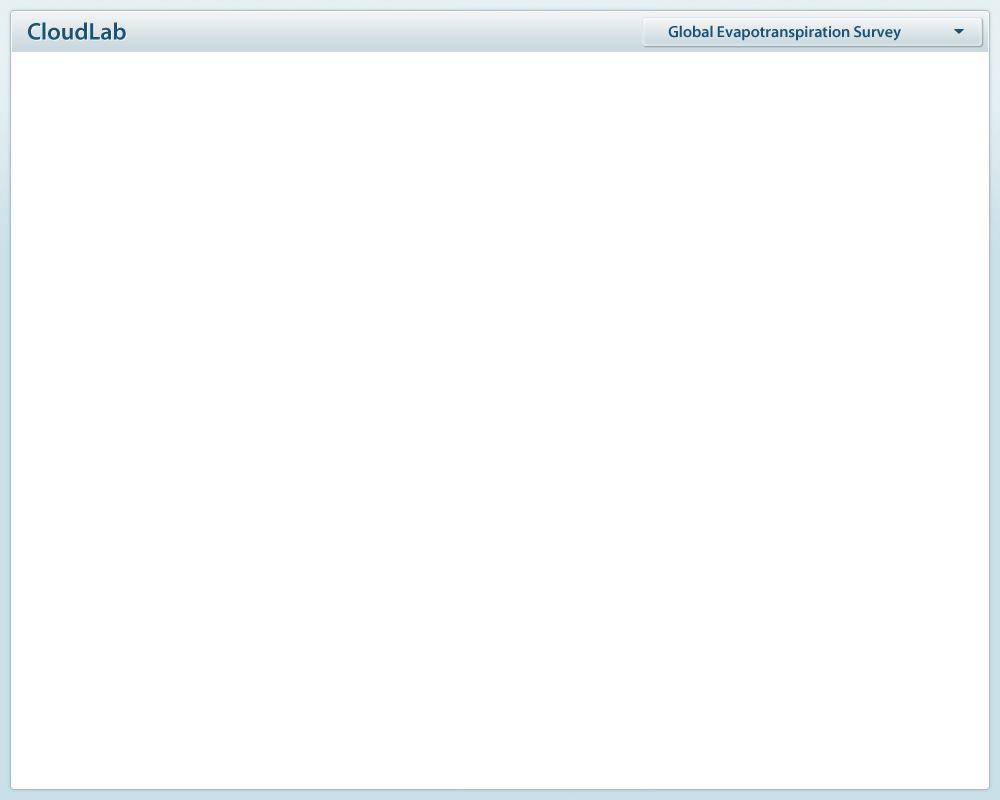
<style>
.page{position:relative;width:1000px;height:800px;background:#ffffff}
.page>*{position:absolute;margin:0}
.t1{font:24px "MyriadPro-Semibold";color:#1a5374}
.t2{font:16px "MyriadPro-Semibold";color:#1a5374}
</style>
<div class="page">
<p class="t1" style="left:28px;top:22px;width:98px;height:18px">CloudLab</p>
<p class="t2" style="left:668px;top:25px;width:233px;height:16px">Global Evapotranspiration Survey</p>
</div>
